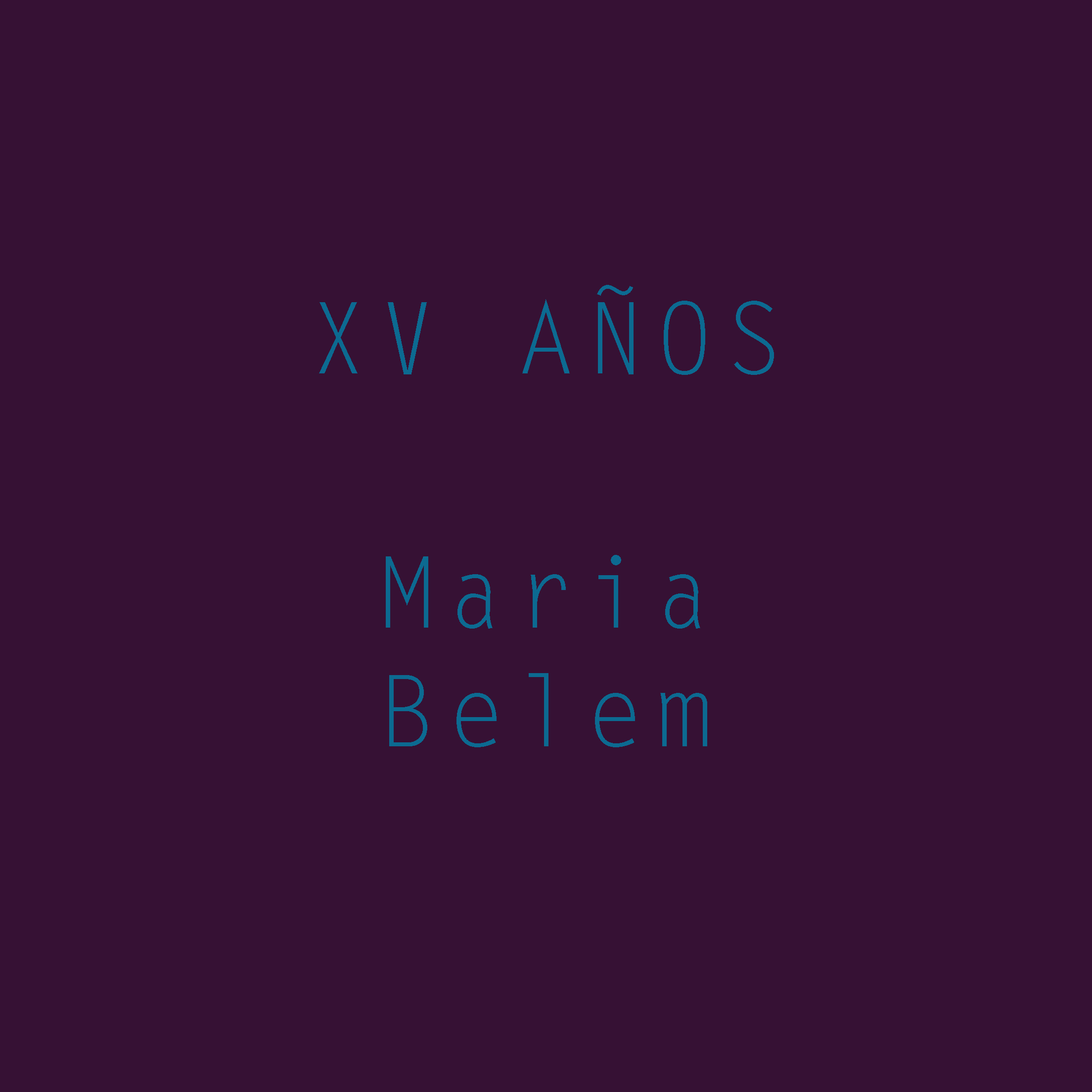
<style>
.page{position:relative;width:1092px;height:1092px;background:#361134}
.page>*{position:absolute;margin:0}
.t1{font:98.9px "LetterGothicStd";letter-spacing:0.1em;color:#0c6a91}
</style>
<div class="page">
<p class="t1" style="left:319px;top:285px;width:455px;height:90px">XV AÑOS</p>
<p class="t1" style="left:386px;top:555px;width:321px;height:192px;text-align:center">Maria<br>Belem</p>
</div>
